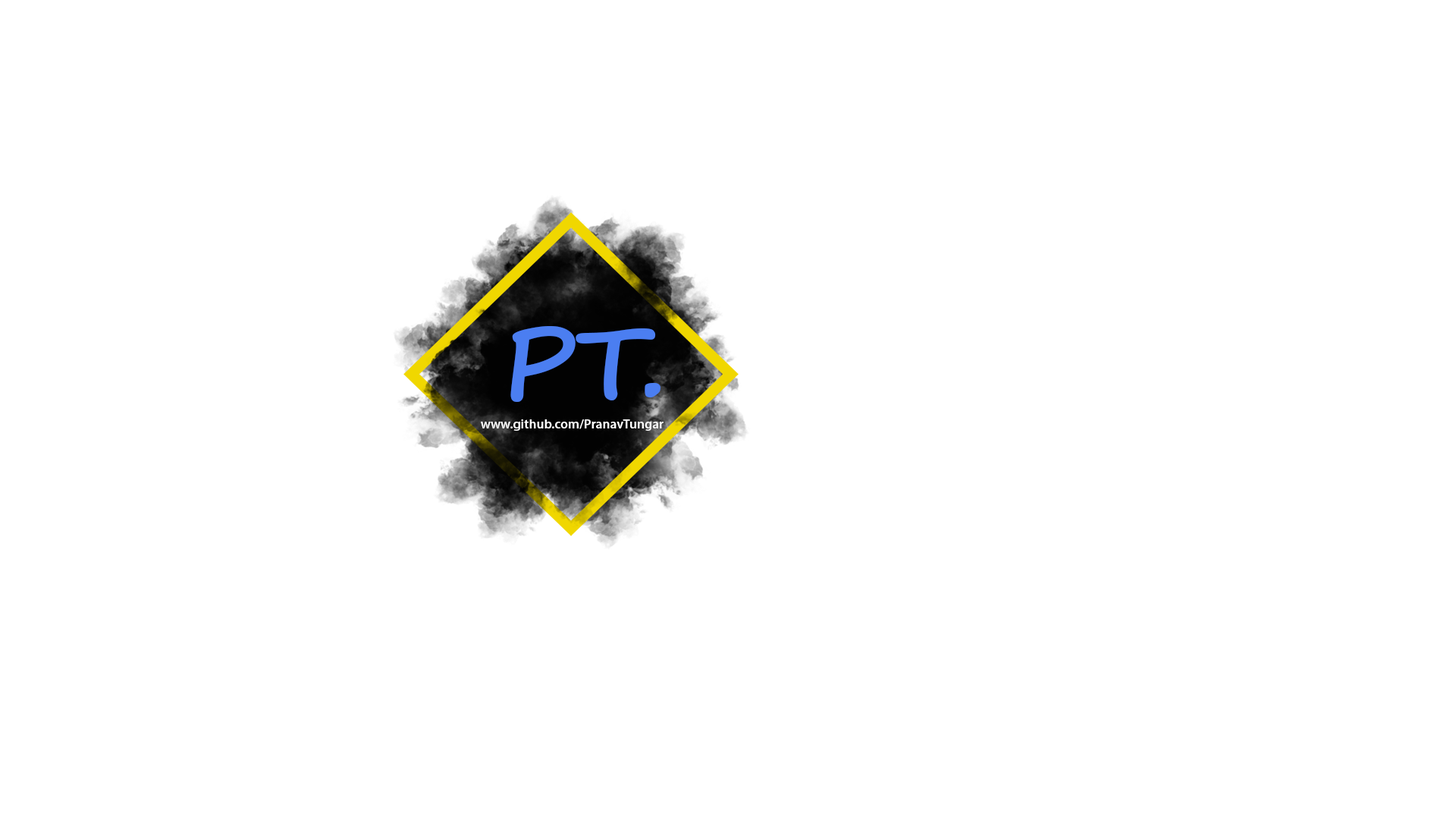
<style>
.page{position:relative;width:1456px;height:819px;background:#ffffff}
.page>*{position:absolute;margin:0}
.t1{font:101.1px "SegoePrint-Bold";color:#4b7ef1;scale:1.04 1}
.t2{font:12.8px "MyriadPro-Semibold";color:#fefefe;scale:1.04 1}
</style>
<div class="page">
<p class="t1" style="left:510px;top:326px;width:150px;height:76px">PT.</p>
<p class="t2" style="left:481px;top:419px;width:183px;height:12px">www.github.com/PranavTungar</p>
</div>
